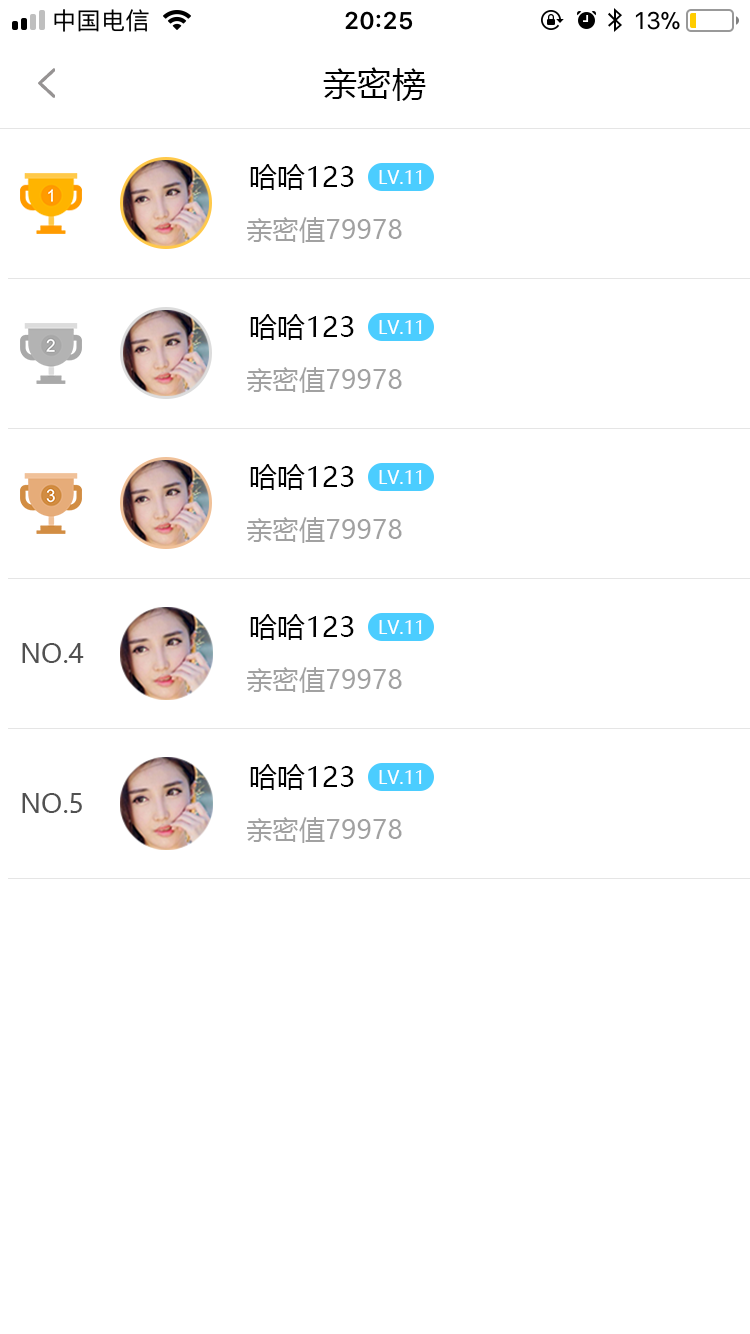
<style>
.page{position:relative;width:750px;height:1334px;background:#ffffff}
.page>*{position:absolute;margin:0}
.t1{font:34px "MicrosoftYaHei";letter-spacing:0.01em;color:#000000}
.t2{font:28px "MicrosoftYaHei";letter-spacing:0.01em;color:#000000}
.t3{font:18px "MicrosoftYaHei";color:#ffffff}
.t4{font:26px "MicrosoftYaHei";letter-spacing:0.01em;color:#a1a1a1}
.t5{font:26px "MicrosoftYaHei";color:#515151}
</style>
<div class="page">
<p class="t1" style="left:323px;top:67px;width:103px;height:34px">亲密榜</p>
<p class="t2" style="left:250px;top:164px;width:104px;height:26px">哈哈123</p>
<p class="t3" style="left:379px;top:170px;width:43px;height:14px">LV.11</p>
<p class="t4" style="left:247px;top:217px;width:155px;height:26px">亲密值79978</p>
<p class="t2" style="left:250px;top:314px;width:104px;height:26px">哈哈123</p>
<p class="t3" style="left:379px;top:320px;width:43px;height:14px">LV.11</p>
<p class="t4" style="left:247px;top:367px;width:155px;height:26px">亲密值79978</p>
<p class="t2" style="left:250px;top:464px;width:104px;height:26px">哈哈123</p>
<p class="t3" style="left:379px;top:470px;width:43px;height:14px">LV.11</p>
<p class="t4" style="left:247px;top:517px;width:155px;height:26px">亲密值79978</p>
<p class="t2" style="left:250px;top:614px;width:104px;height:26px">哈哈123</p>
<p class="t3" style="left:379px;top:620px;width:43px;height:14px">LV.11</p>
<p class="t5" style="left:22px;top:643px;width:62px;height:20px">NO.4</p>
<p class="t4" style="left:247px;top:667px;width:155px;height:26px">亲密值79978</p>
<p class="t2" style="left:250px;top:764px;width:104px;height:26px">哈哈123</p>
<p class="t3" style="left:379px;top:770px;width:43px;height:14px">LV.11</p>
<p class="t5" style="left:22px;top:793px;width:60px;height:20px">NO.5</p>
<p class="t4" style="left:247px;top:817px;width:155px;height:26px">亲密值79978</p>
</div>
